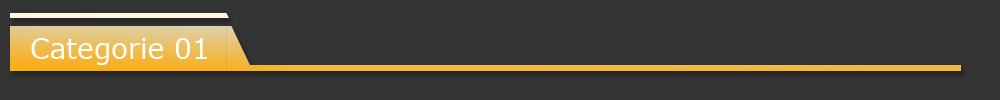
<style>
.page{position:relative;width:1000px;height:100px;background:#333333}
.page>*{position:absolute;margin:0}
.t1{font:27.9px "Verdana";color:#ffffff}
</style>
<div class="page">
<p class="t1" style="left:31px;top:38px;width:176px;height:27px">Categorie 01</p>
</div>
